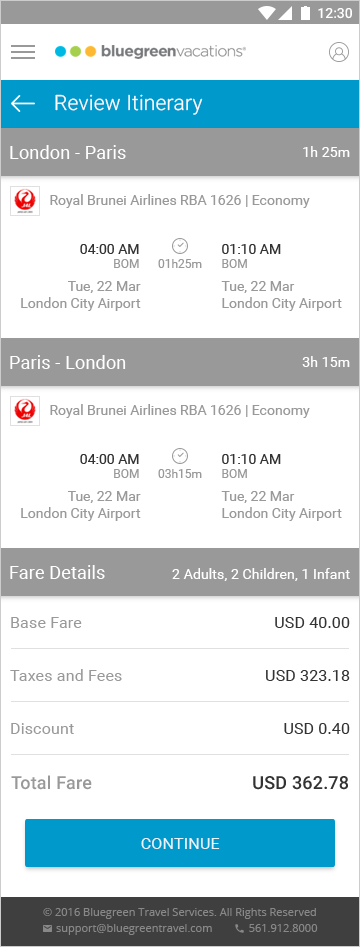
<style>
.page{position:relative;width:360px;height:947px;background:#ffffff}
.page>*{position:absolute;margin:0}
.t1{font:21px "Roboto-Light";letter-spacing:0.01em;color:#ffffff}
.t2{font:18px "Roboto-Regular";letter-spacing:0.01em;color:#ffffff}
.t3{font:14px "Roboto-Regular";letter-spacing:0.01em;color:#ffffff}
.t4{font:14px "Roboto-Regular";color:#999999}
.t5{font:14px "Roboto-Regular";color:#333333}
.t6{font:12px "Roboto-Regular";color:#999999}
.t7{font:16px "Roboto-Regular";letter-spacing:0.01em;color:#999999}
.t8{font:16px "Roboto-Regular";letter-spacing:0.01em;color:#333333}
.t9{font:18px "Roboto-Medium";letter-spacing:0.01em;color:#999999}
.t10{font:18px "Roboto-Medium";letter-spacing:0.01em;color:#333333}
.t11{font:16px "Roboto-Regular";letter-spacing:0.01em;color:#ffffff;text-transform:uppercase}
</style>
<div class="page">
<p class="t1" style="left:55px;top:94px;width:148px;height:21px">Review Itinerary</p>
<p class="t2" style="left:10px;top:145px;width:116px;height:14px">London - Paris</p>
<p class="t3" style="left:303px;top:146px;width:47px;height:11px">1h 25m</p>
<p class="t4" style="left:50px;top:194px;width:260px;height:14px">Royal Brunei Airlines RBA 1626 | Economy</p>
<p class="t5" style="left:80px;top:244px;width:59px;height:24px;text-align:right">04:00 AM<br><span class="t6">BOM</span></p>
<p class="t5" style="left:222px;top:244px;width:59px;height:24px">01:10 AM<br><span class="t6">BOM</span></p>
<p class="t6" style="left:158px;top:259px;width:44px;height:9px">01h25m</p>
<p class="t4" style="left:21px;top:281px;width:120px;height:30px;text-align:right">Tue, 22 Mar<br>London City Airport</p>
<p class="t4" style="left:221px;top:281px;width:121px;height:30px">Tue, 22 Mar<br>London City Airport</p>
<p class="t2" style="left:10px;top:355px;width:116px;height:14px">Paris - London</p>
<p class="t3" style="left:302px;top:356px;width:48px;height:11px">3h 15m</p>
<p class="t4" style="left:50px;top:404px;width:260px;height:14px">Royal Brunei Airlines RBA 1626 | Economy</p>
<p class="t5" style="left:80px;top:454px;width:59px;height:24px;text-align:right">04:00 AM<br><span class="t6">BOM</span></p>
<p class="t5" style="left:222px;top:454px;width:59px;height:24px">01:10 AM<br><span class="t6">BOM</span></p>
<p class="t6" style="left:158px;top:469px;width:44px;height:9px">03h15m</p>
<p class="t4" style="left:21px;top:491px;width:120px;height:30px;text-align:right">Tue, 22 Mar<br>London City Airport</p>
<p class="t4" style="left:221px;top:491px;width:121px;height:30px">Tue, 22 Mar<br>London City Airport</p>
<p class="t2" style="left:10px;top:565px;width:95px;height:14px">Fare Details</p>
<p class="t3" style="left:172px;top:568px;width:178px;height:13px">2 Adults, 2 Children, 1 Infant</p>
<p class="t7" style="left:11px;top:617px;width:71px;height:11px">Base Fare</p>
<p class="t8" style="left:275px;top:617px;width:75px;height:11px">USD 40.00</p>
<p class="t7" style="left:10px;top:669px;width:112px;height:12px">Taxes and Fees</p>
<p class="t8" style="left:266px;top:670px;width:84px;height:11px">USD 323.18</p>
<p class="t7" style="left:11px;top:723px;width:63px;height:11px">Discount</p>
<p class="t8" style="left:284px;top:723px;width:66px;height:11px">USD 0.40</p>
<p class="t9" style="left:11px;top:775px;width:81px;height:15px">Total Fare</p>
<p class="t10" style="left:253px;top:776px;width:95px;height:14px">USD 362.78</p>
<p class="t11" style="left:141px;top:838px;width:79px;height:11px;opacity:0.87">continue</p>
</div>
